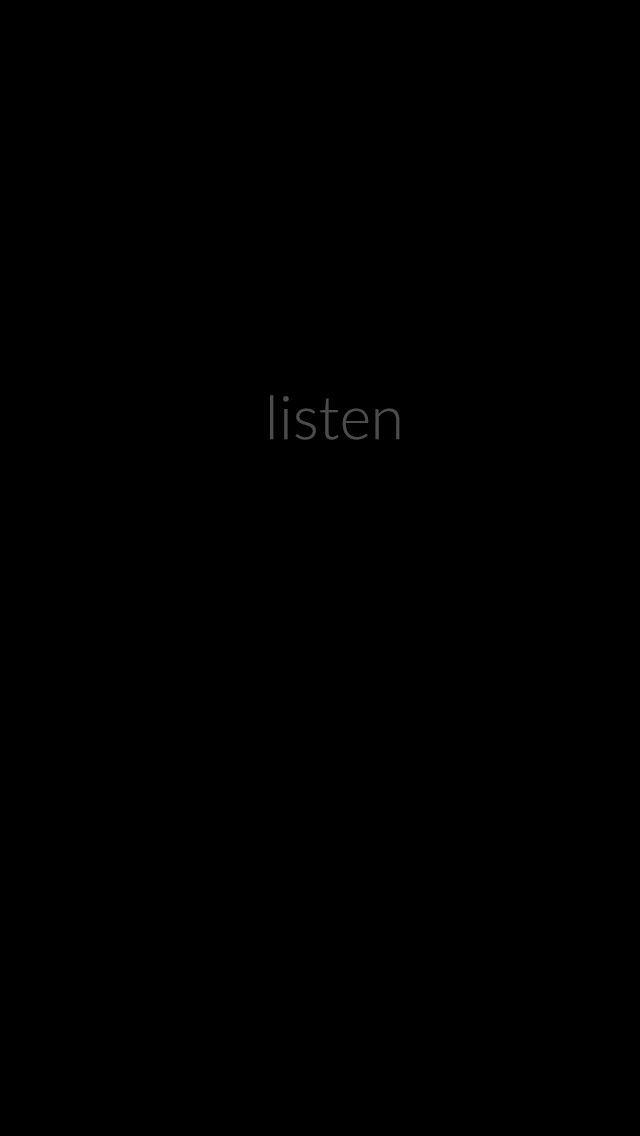
<style>
.page{position:relative;width:640px;height:1136px;background:#000000}
.page>*{position:absolute;margin:0}
.t1{font:60px "Lato-Light";color:#4c4c4c}
</style>
<div class="page">
<p class="t1" style="left:270px;top:395px;width:130px;height:45px">listen</p>
</div>
